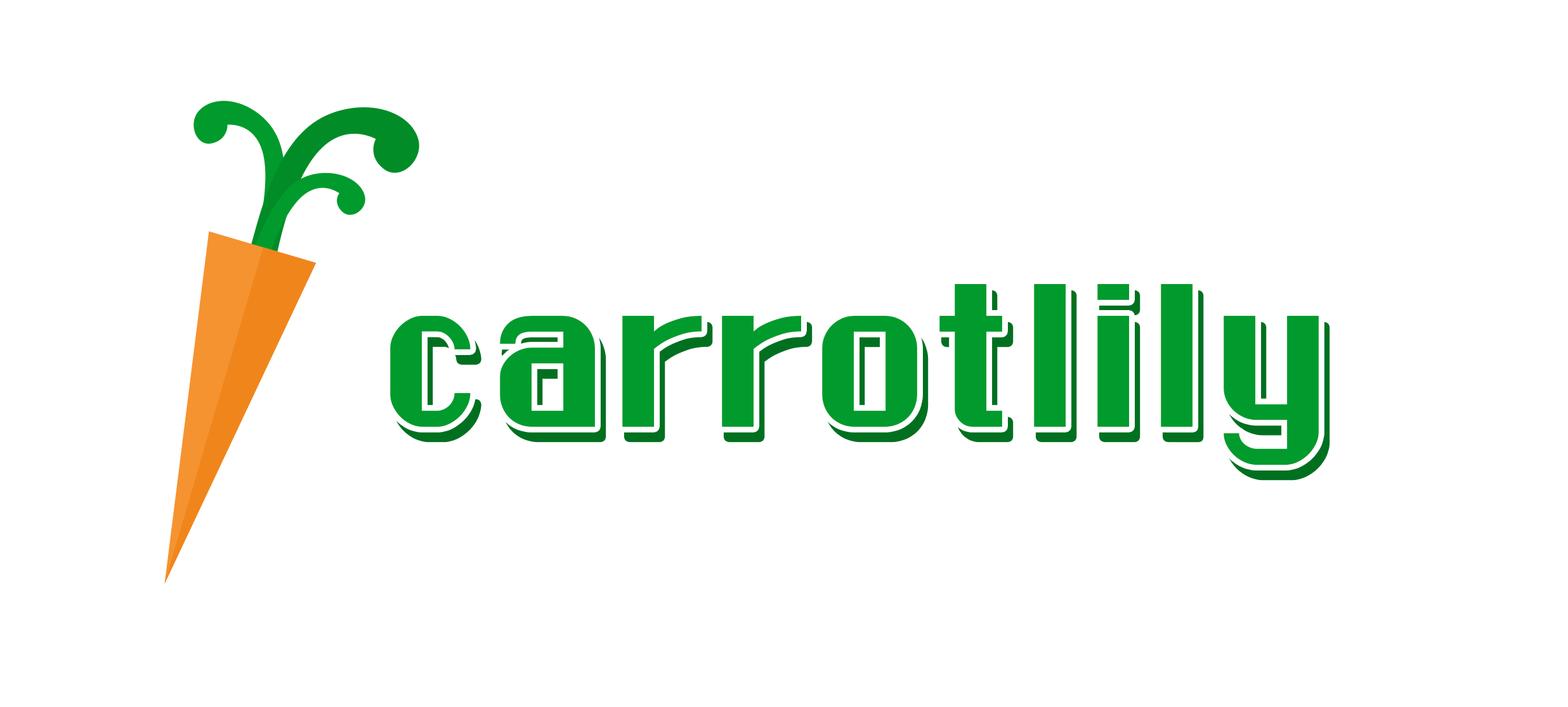
<style>
.page{position:relative;width:1568px;height:707px;background:#ffffff}
.page>*{position:absolute;margin:0}
.t1{font:190.3px "ChicagoFLF";color:#009b2c}
.t2{font:190.3px "ChicagoFLF";letter-spacing:-0.01em;color:#009b2c}
.t3{font:190.3px "ChicagoFLF";letter-spacing:-0.025em;color:#009b2c}
.t4{font:190.3px "ChicagoFLF";letter-spacing:0.025em;color:#009b2c}
.t5{font:190.3px "ChicagoFLF";letter-spacing:-0.05em;color:#009b2c}
</style>
<div class="page">
<p class="t1" style="left:390px;top:284px;width:929px;height:181px"><span class="t2">c</span><span class="t3">a</span><span class="t4">rr</span><span class="t5">o</span>tlily</p>
</div>
